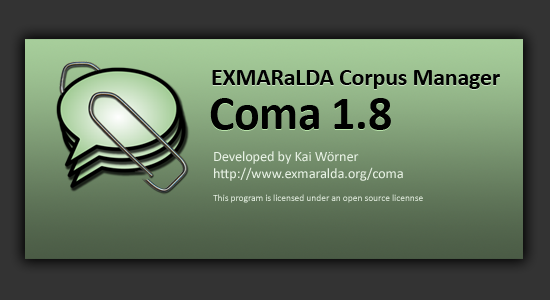
<style>
.page{position:relative;width:550px;height:300px;background:#333333}
.page>*{position:absolute;margin:0}
.t1{font:23.8px "Calibri-Bold";letter-spacing:-0.005em;color:#010101}
.t2{font:47.6px "Calibri-Bold";letter-spacing:-0.005em;color:#000000}
.t3{font:9.5px "Calibri";letter-spacing:-0.005em;color:#e8f2e5}
.t4{font:14.3px "Calibri";letter-spacing:-0.005em;color:#e8f2e5}
</style>
<div class="page">
<p class="t1" style="left:212px;top:71px;width:288px;height:19px">EXMARaLDA Corpus Manager</p>
<p class="t1" style="left:212px;top:70px;width:288px;height:19px">EXMARaLDA Corpus Manager</p>
<p class="t2" style="left:210px;top:99px;width:181px;height:32px">Coma 1.8</p>
<p class="t2" style="left:210px;top:98px;width:181px;height:32px">Coma 1.8</p>
<p class="t3" style="left:213px;top:151px;width:210px;height:52px"><span class="t4">Developed by Kai Wörner<br>http://www.exmaralda.org/coma<br></span><br>This program is licensed under an open source licennse</p>
</div>
